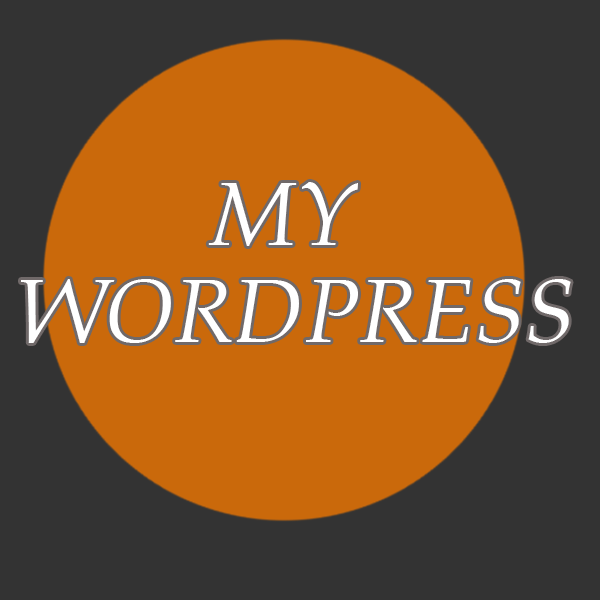
<style>
.page{position:relative;width:600px;height:600px;background:#333333}
.page>*{position:absolute;margin:0}
.t1{font:90.3px "BookAntiqua-Italic";color:#ffffff}
.t2{font:90px "BookAntiqua-Italic";color:#ffffff}
</style>
<div class="page">
<p class="t1" style="left:208px;top:182px;width:150px;height:64px">MY</p>
<p class="t2" style="left:21px;top:279px;width:550px;height:64px">WORDPRESS</p>
</div>
